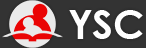
<style>
.page{position:relative;width:146px;height:48px;background:#333333}
.page>*{position:absolute;margin:0}
.t1{font:39.6px "CenturyGothic-Bold";color:#ffffff}
</style>
<div class="page">
<p class="t1" style="left:69px;top:10px;width:74px;height:29px">YSC</p>
</div>
